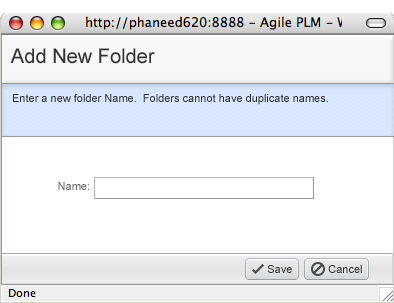
<style>
.page{position:relative;width:394px;height:303px;background:#ffffff}
.page>*{position:absolute;margin:0}
.t1{font:20px "ArialMT";color:#333333}
.t2{font:11px "ArialMT";color:#333333}
.t3{font:11px "ArialMT";color:#666666}
</style>
<div class="page">
<p class="t1" style="left:10px;top:48px;width:145px;height:16px">Add New Folder</p>
<p class="t2" style="left:13px;top:94px;width:315px;height:11px">Enter a new folder Name.  Folders cannot have duplicate names.</p>
<p class="t3" style="left:58px;top:182px;width:31px;height:8px">Name:</p>
<p class="t2" style="left:267px;top:265px;width:25px;height:8px">Save</p>
<p class="t2" style="left:328px;top:265px;width:34px;height:8px">Cancel</p>
</div>
